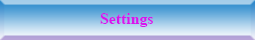
<style>
.page{position:relative;width:255px;height:40px}
.page>*{position:absolute;margin:0}
.t1{font:15.8px "TimesNewRomanPS-BoldMT";color:#d815ed}
</style>
<div class="page">
<p class="t1" style="left:100px;top:13px;width:53px;height:14px">Settings</p>
</div>
